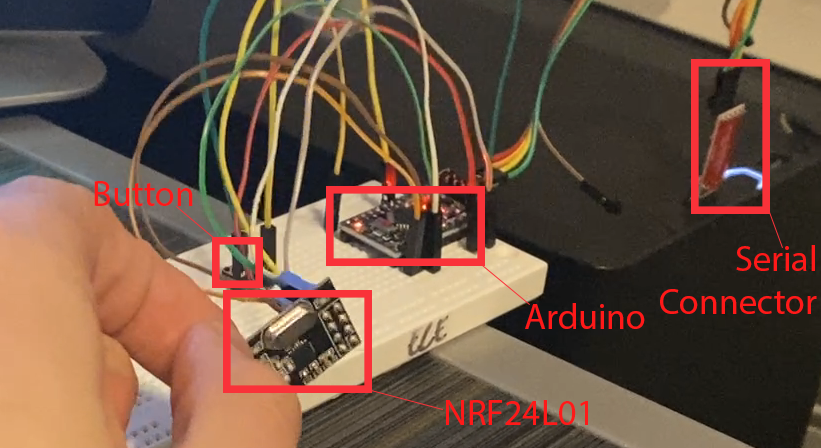
<style>
.page{position:relative;width:821px;height:448px}
.page>*{position:absolute;margin:0}
.t1{font:36px "MyriadPro-Regular";color:#ff1919}
</style>
<div class="page">
<p class="t1" style="left:94px;top:181px;width:99px;height:25px">Button</p>
<p class="t1" style="left:660px;top:245px;width:157px;height:69px;text-align:right">Serial Connector</p>
<p class="t1" style="left:525px;top:303px;width:120px;height:26px">Arduino</p>
<p class="t1" style="left:446px;top:400px;width:142px;height:25px">NRF24L01</p>
</div>
